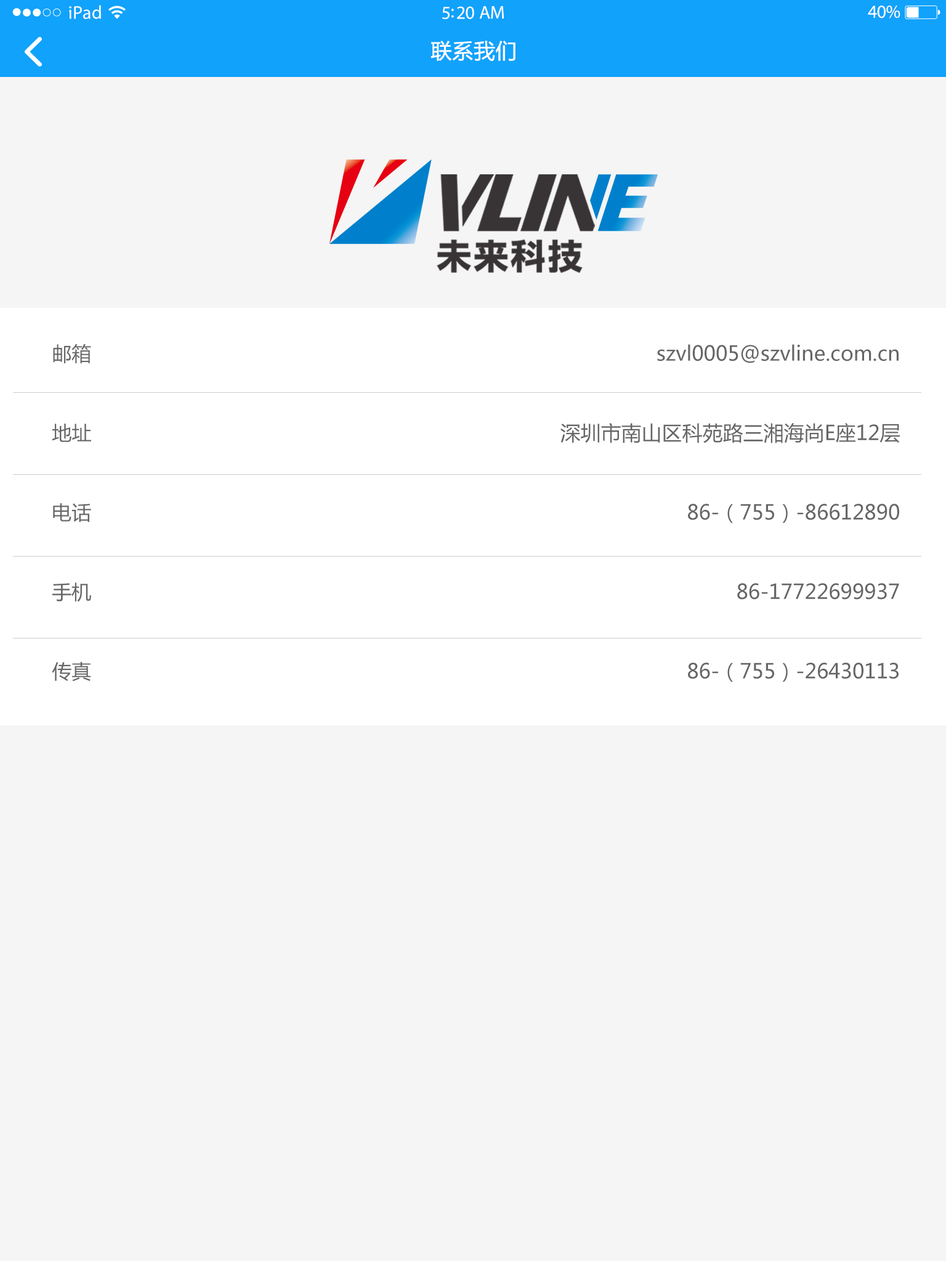
<style>
.page{position:relative;width:946px;height:1261px;background:#f5f5f5}
.page>*{position:absolute;margin:0}
.t1{font:18.5px "MyriadPro-Regular";letter-spacing:0.02em;color:#ffffff}
.t2{font:18.5px "MyriadPro-Regular";letter-spacing:-0.02em;color:#ffffff}
.t3{font:20.9px "MicrosoftYaHei";color:#ffffff;font-weight:bold}
.t4{font:19.7px/79.4px "MicrosoftYaHei";color:#666666}
.t5{font:20.3px/79.4px "MicrosoftYaHei";color:#666666}
</style>
<div class="page">
<p class="t1" style="left:69px;top:5px;width:32px;height:14px">iPad</p>
<p class="t2" style="left:867px;top:6px;width:33px;height:12px">40%</p>
<p class="t2" style="left:442px;top:6px;width:62px;height:13px">5:20 AM</p>
<p class="t3" style="left:430px;top:41px;width:85px;height:20px">联系我们</p>
<p class="t4" style="left:52px;top:344px;width:39px;height:338px">邮箱<br>地址<br>电话<br>手机<br>传真</p>
<p class="t5" style="left:560px;top:344px;width:340px;height:338px;text-align:right">szvl0005@szvline.com.cn<br>深圳市南山区科苑路三湘海尚E座12层<br>86-（755）-86612890<br>86-17722699937<br>86-（755）-26430113</p>
</div>
